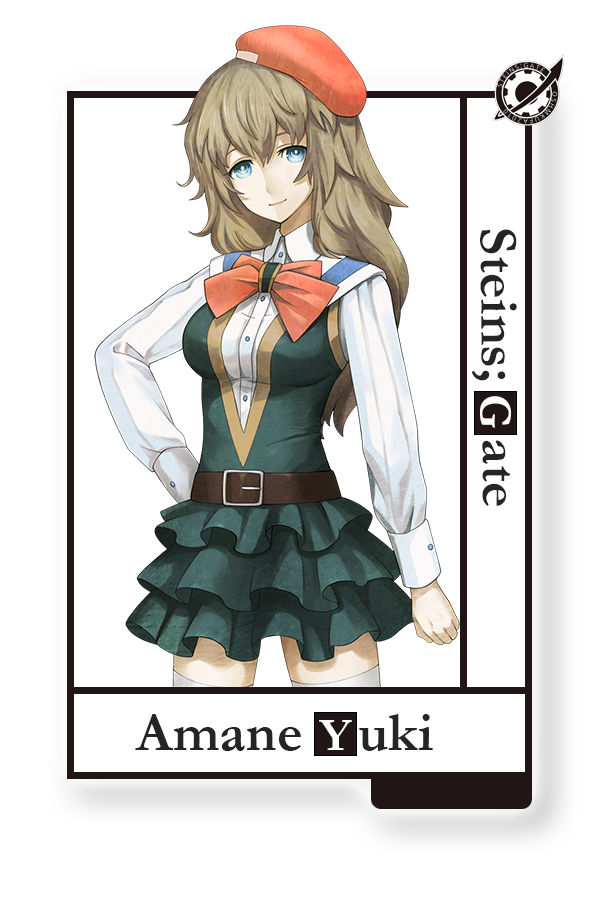
<style>
.page{position:relative;width:600px;height:900px;background:#ffffff}
.page>*{position:absolute;margin:0}
.t1{font:55.4px "Garamond-Bold";color:#252525}
.t2{font:47px "Garamond-Bold";color:#ffffff}
</style>
<div class="page">
<p class="t1" style="left:472px;top:229px;width:45px;height:277px;rotate:89deg">Steins;    ate</p>
<p class="t2" style="left:480px;top:396px;width:31px;height:32px;rotate:90deg">G</p>
<p class="t1" style="left:135px;top:714px;width:298px;height:37px">Amane    uki</p>
<p class="t2" style="left:319px;top:720px;width:33px;height:30px">Y</p>
</div>
